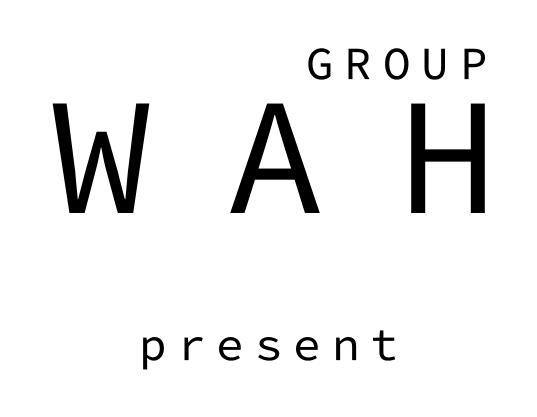
<style>
.page{position:relative;width:537px;height:417px;background:#ffffff}
.page>*{position:absolute;margin:0}
.t1{font:45.8px "SourceCodePro-Regular";letter-spacing:0.24em;color:#000000}
.t2{font:166.7px "SourceCodePro-Regular";letter-spacing:0.44em;color:#000000}
</style>
<div class="page">
<p class="t1" style="left:308px;top:48px;width:177px;height:32px">GROUP</p>
<p class="t2" style="left:52px;top:103px;width:433px;height:110px">WAH</p>
<p class="t1" style="left:143px;top:330px;width:252px;height:40px">present</p>
</div>
